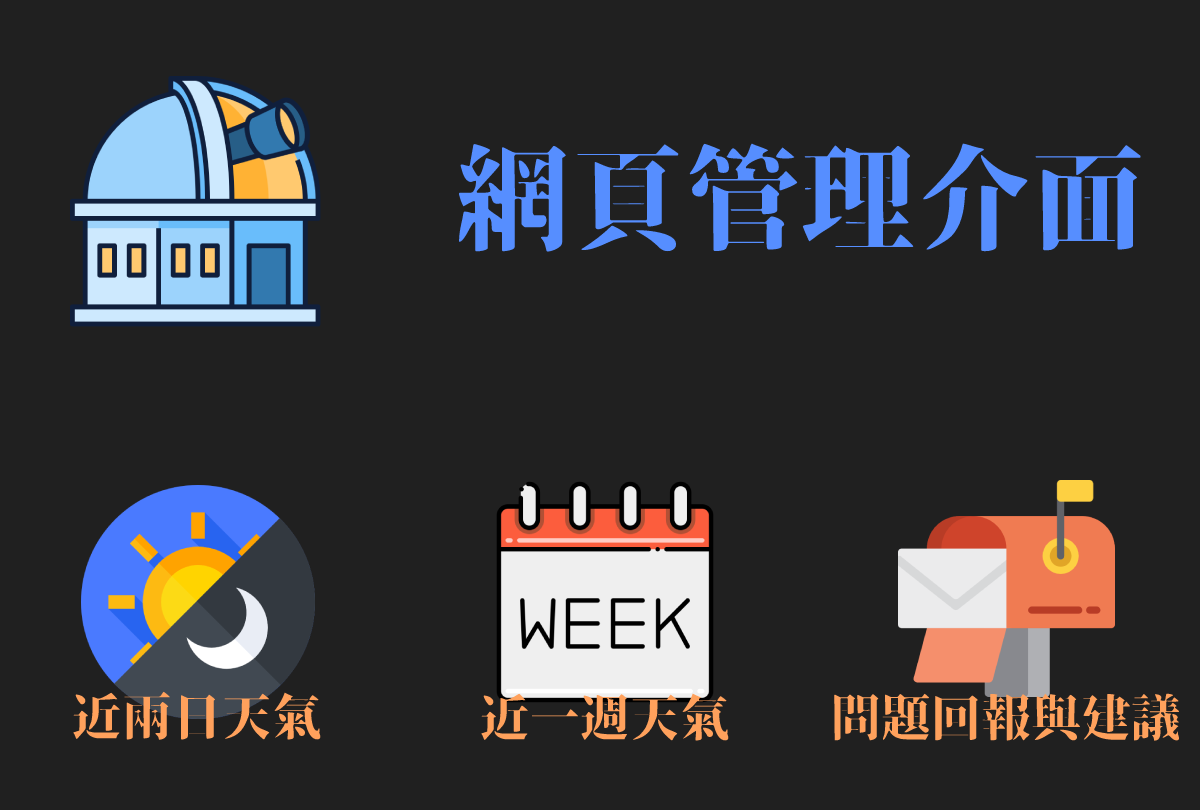
<style>
.page{position:relative;width:1200px;height:810px;background:#202020}
.page>*{position:absolute;margin:0}
.t1{font:115px "SoukouMincho";color:#568eff}
.t2{font:50px "SoukouMincho";color:#ffa15c}
</style>
<div class="page">
<p class="t1" style="left:458px;top:143px;width:683px;height:109px">網頁管理介面</p>
<p class="t2" style="left:73px;top:691px;width:248px;height:49px">近兩日天氣</p>
<p class="t2" style="left:481px;top:693px;width:248px;height:48px">近一週天氣</p>
<p class="t2" style="left:834px;top:693px;width:346px;height:48px">問題回報與建議</p>
</div>
